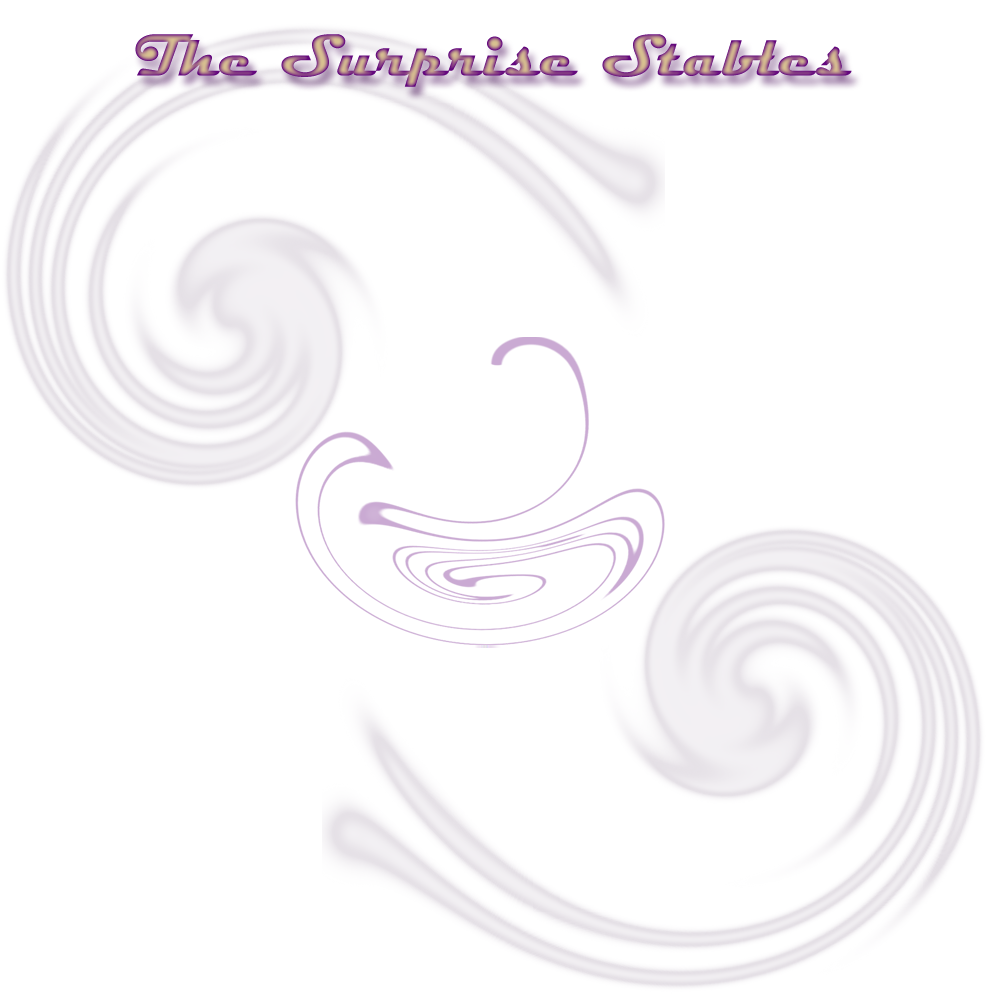
<style>
.page{position:relative;width:1000px;height:1000px;background:#ffffff}
.page>*{position:absolute;margin:0}
.t1{font:60px "Magneto-Bold"}
</style>
<div class="page">
<p class="t1" style="left:135px;top:34px;width:717px;height:53px">The Surprise Stables</p>
</div>
